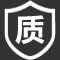
<style>
.page{position:relative;width:60px;height:60px;background:#333333}
.page>*{position:absolute;margin:0}
.t1{font:30px "MicrosoftYaHei-Bold";color:#ffffff}
</style>
<div class="page">
<p class="t1" style="left:15px;top:15px;width:30px;height:29px">质</p>
</div>
